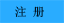
<style>
.page{position:relative;width:64px;height:23px;background:#29acff}
.page>*{position:absolute;margin:0}
.t1{font:12px "SimSun"}
</style>
<div class="page">
<p class="t1" style="left:15px;top:6px;width:29px;height:11px">注 册</p>
</div>
